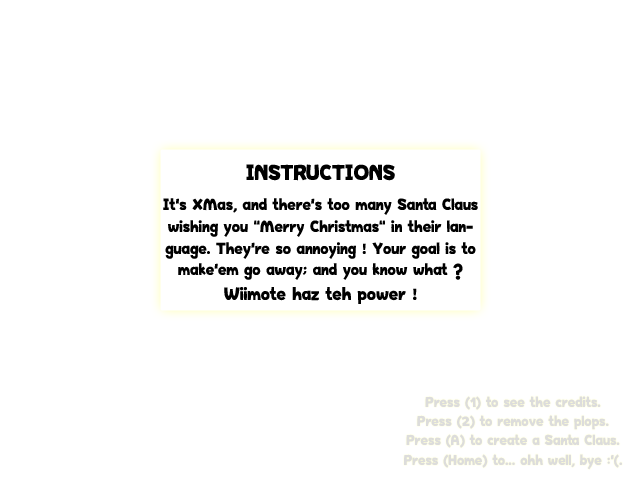
<style>
.page{position:relative;width:640px;height:480px;background:#ffffff}
.page>*{position:absolute;margin:0}
.t1{font:18px "HappyHell";color:#000000}
.t2{font:1px "HappyHell";color:#000000}
.t3{font:24px "HappyHell";color:#000000}
.t4{font:20px "HappyHell";color:#000000}
.t5{font:16px "HappyHell";color:#dcdcdc}
</style>
<div class="page">
<p class="t1" style="left:163px;top:164px;width:315px;height:140px;text-align:center"><span class="t2"><br></span><span class="t3">INSTRUCTIONS<br><br></span>It's XMas, and there's too many Santa Claus wishing you "Merry Christmas" in their language. They're so annoying ! Your goal is to make'em go away; and you know what ?<br><br><span class="t4">Wiimote haz teh power !</span></p>
<p class="t5" style="left:404px;top:396px;width:218px;height:74px;text-align:center">Press (1) to see the credits.<br>Press (2) to remove the plops.<br>Press (A) to create a Santa Claus.<br>Press (Home) to... ohh well, bye :'(.</p>
</div>
